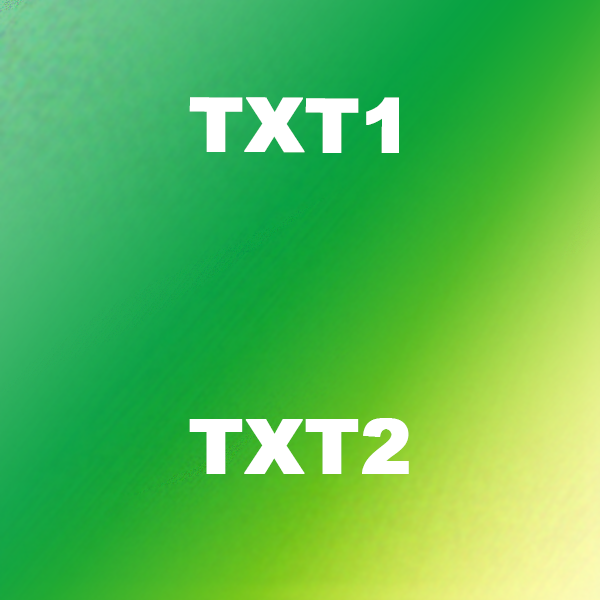
<style>
.page{position:relative;width:600px;height:600px}
.page>*{position:absolute;margin:0}
.t1{font:75px "Arial-Black";color:#ffffff;text-transform:uppercase;font-weight:bold}
</style>
<div class="page">
<p class="t1" style="left:189px;top:97px;width:210px;height:56px">Txt1</p>
<p class="t1" style="left:189px;top:418px;width:220px;height:56px">Txt2</p>
</div>
